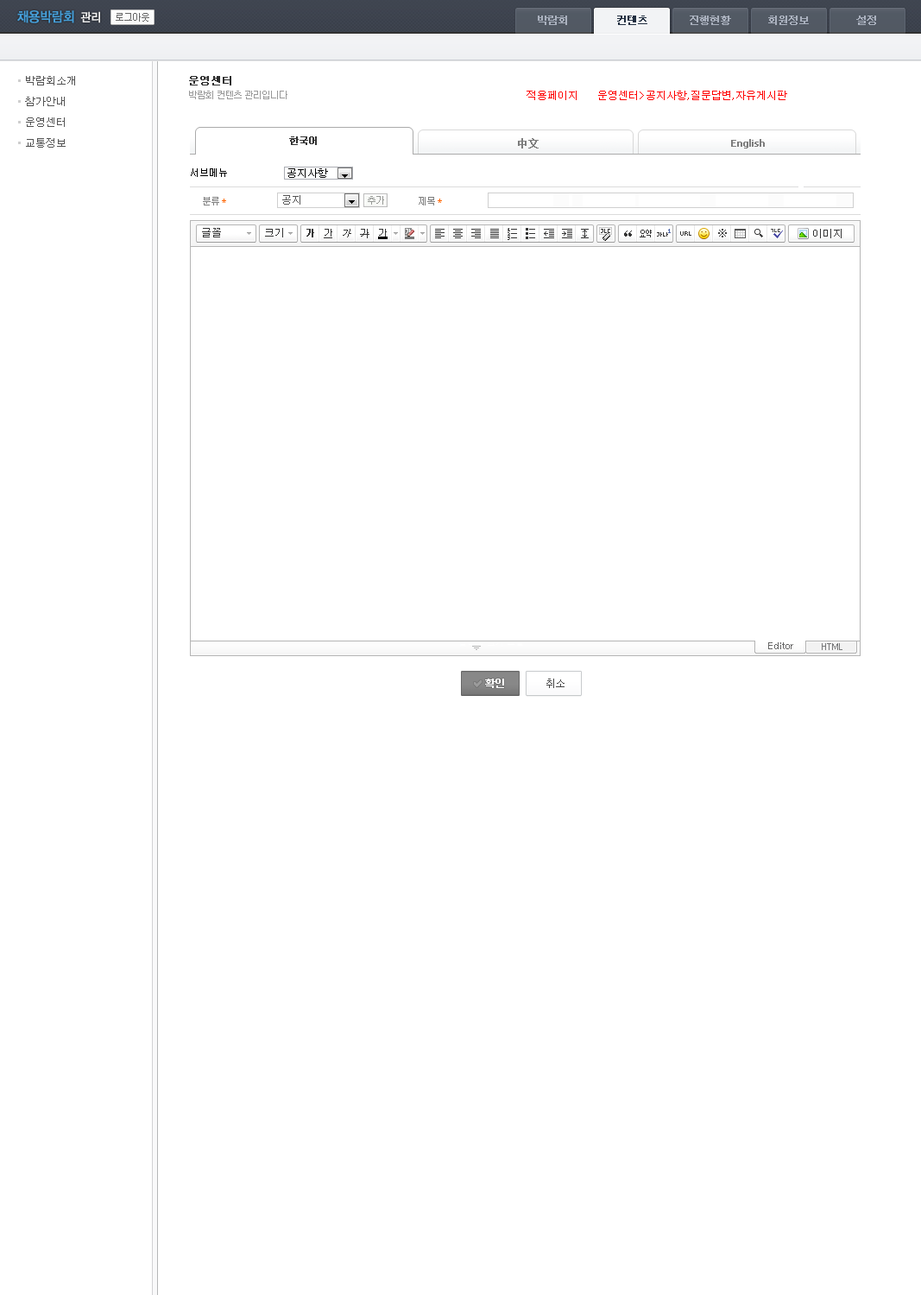
<style>
.page{position:relative;width:921px;height:1295px;background:#ffffff}
.page>*{position:absolute;margin:0}
.t1{font:13.8px "YDIYGO130-KSCpc-EUC-H";letter-spacing:-0.1em;color:#469fd9;font-weight:bold;scale:0.9 1}
.t2{font:12.1px "YDIYGO130-KSCpc-EUC-H";letter-spacing:-0.1em;color:#f0f0f0;font-weight:bold;scale:0.9 1}
.t3{font:10.4px "Dotum";letter-spacing:-0.1em;color:#aab1be;font-weight:bold}
.t4{font:10.4px "Dotum";letter-spacing:-0.1em;color:#212e40;font-weight:bold}
.t5{font:10.4px/20.7px "Dotum";color:#535353}
.t6{font:10.4px "Dotum";color:#2e2e2e;font-weight:bold}
.t7{font:9.5px "Dotum";letter-spacing:-0.1em;color:#999999}
.t8{font:10.4px "Dotum";color:#ff0000}
.t9{font:9.5px "Dotum";letter-spacing:-0.1em;color:#333333;font-weight:bold}
.t10{font:10.4px "SimSun";color:#7d7d7d;font-weight:bold}
.t11{font:9.5px "Tahoma";color:#7d7d7d;font-weight:bold}
.t12{font:9.5px "Dotum";letter-spacing:-0.1em;color:#7d7d7d}
.t13{font:10.4px "Dotum";color:#555555}
.t14{font:9.5px "Dotum";letter-spacing:-0.1em;color:#ff6600}
</style>
<div class="page">
<p class="t1" style="left:17px;top:10px;width:57px;height:13px">채용박람회</p>
<p class="t2" style="left:80px;top:11px;width:20px;height:12px">관리</p>
<p class="t3" style="left:538px;top:16px;width:29px;height:9px">박람회</p>
<p class="t4" style="left:617px;top:16px;width:30px;height:9px">컨텐츠</p>
<p class="t3" style="left:690px;top:16px;width:41px;height:9px">진행현황</p>
<p class="t3" style="left:768px;top:16px;width:41px;height:9px">회원정보</p>
<p class="t3" style="left:856px;top:16px;width:20px;height:9px">설정</p>
<p class="t5" style="left:25px;top:76px;width:50px;height:72px">박람회소개<br>참가안내<br>운영센터<br>교통정보</p>
<p class="t6" style="left:189px;top:76px;width:42px;height:9px">운영센터</p>
<p class="t7" style="left:189px;top:91px;width:98px;height:8px">박람회 컨텐츠 관리입니다</p>
<p class="t8" style="left:527px;top:91px;width:50px;height:9px">적용페이지</p>
<p class="t8" style="left:598px;top:91px;width:189px;height:9px">운영센터&gt;공지사항,질문답변,자유게시판</p>
<p class="t9" style="left:289px;top:136px;width:28px;height:9px">한국어</p>
<p class="t10" style="left:518px;top:138px;width:21px;height:10px">中文</p>
<p class="t11" style="left:731px;top:139px;width:34px;height:9px">English</p>
<p class="t12" style="left:203px;top:197px;width:16px;height:8px">분류</p>
<p class="t13" style="left:282px;top:195px;width:18px;height:10px">공지</p>
<p class="t12" style="left:419px;top:197px;width:16px;height:8px">제목</p>
<p class="t14" style="left:222px;top:199px;width:4px;height:4px">*</p>
<p class="t14" style="left:438px;top:199px;width:4px;height:4px">*</p>
</div>
